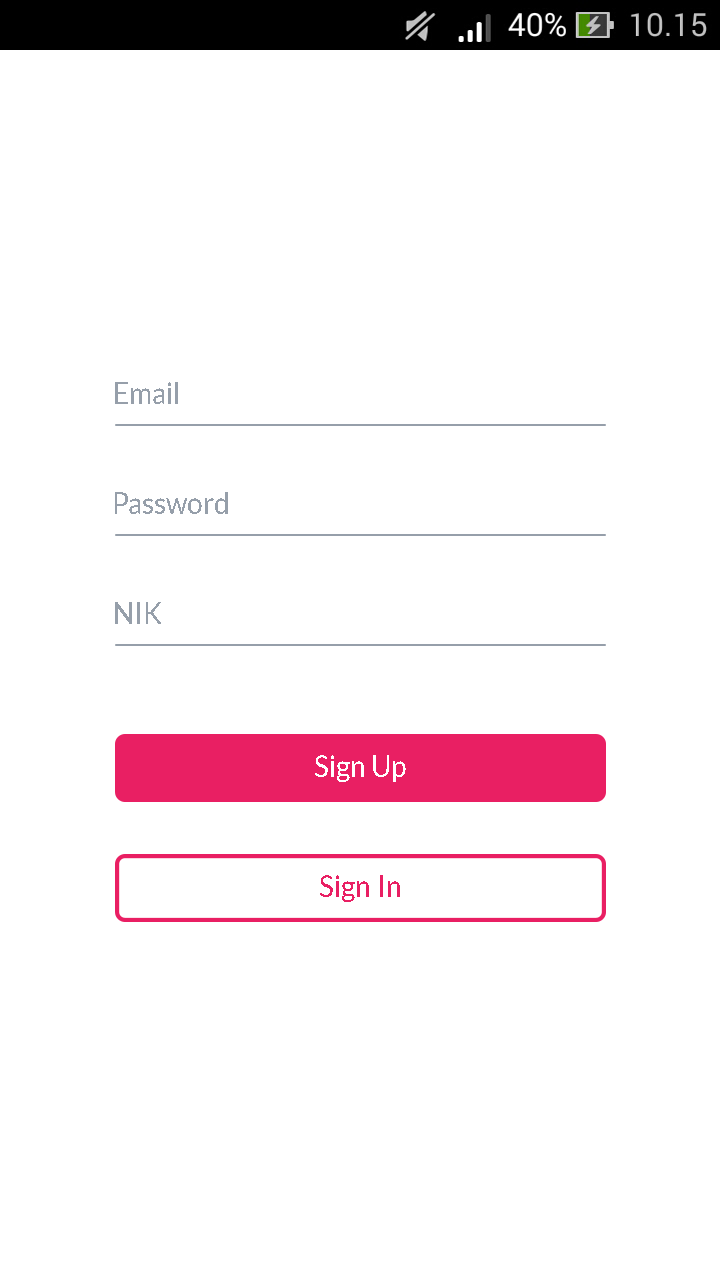
<style>
.page{position:relative;width:720px;height:1280px;background:#ffffff}
.page>*{position:absolute;margin:0}
.t1{font:29.2px "Lato-Regular";color:#969faa;scale:0.96 1}
.t2{font:29.2px "Lato-Regular";color:#ffffff;scale:0.96 1}
.t3{font:29.2px "Lato-Regular";color:#e91f63;scale:0.96 1}
</style>
<div class="page">
<p class="t1" style="left:115px;top:382px;width:63px;height:22px">Email</p>
<p class="t1" style="left:115px;top:492px;width:113px;height:22px">Password</p>
<p class="t1" style="left:115px;top:602px;width:46px;height:22px">NIK</p>
<p class="t2" style="left:315px;top:755px;width:91px;height:27px">Sign Up</p>
<p class="t3" style="left:320px;top:875px;width:80px;height:27px">Sign In</p>
</div>
